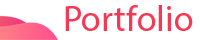
<style>
.page{position:relative;width:200px;height:40px;background:#ffffff}
.page>*{position:absolute;margin:0}
.t1{font:36px "MyriadPro-Regular";letter-spacing:0.005em;color:#f63854}
</style>
<div class="page">
<p class="t1" style="left:65px;top:5px;width:128px;height:26px">Portfolio</p>
</div>
